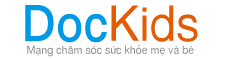
<style>
.page{position:relative;width:225px;height:60px;background:#ffffff}
.page>*{position:absolute;margin:0}
.t1{font:48.3px "SansSerif";color:#0099e6;font-weight:bold;scale:0.96 1}
.t2{font:48.3px "SansSerif";color:#e45b03;scale:0.96 1}
.t3{font:11px "SansSerif";color:#949494;scale:0.96 1}
</style>
<div class="page">
<p class="t1" style="left:25px;top:5px;width:82px;height:38px">Doc</p>
<p class="t2" style="left:111px;top:5px;width:87px;height:37px">Kids</p>
<p class="t3" style="left:27px;top:45px;width:167px;height:12px">Mạng chăm sóc sức khỏe mẹ và bé</p>
</div>
